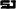
<style>
.page{position:relative;width:16px;height:9px;background:#000000}
.page>*{position:absolute;margin:0}
.t1{font:8.3px "Electric-Toaster";color:#000000}
</style>
<div class="page">
<p class="t1" style="left:6px;top:0px;width:10px;height:9px">j</p>
</div>
